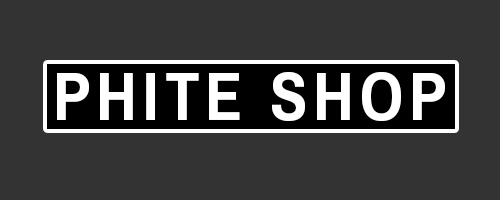
<style>
.page{position:relative;width:500px;height:200px;background:#333333}
.page>*{position:absolute;margin:0}
.t1{font:117.5px "Pragati-Bold";letter-spacing:0.05em;color:#ffffff}
</style>
<div class="page">
<p class="t1" style="left:57px;top:72px;width:388px;height:49px">PHITE SHOP</p>
</div>
